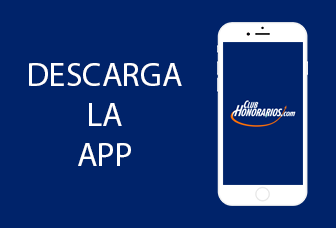
<style>
.page{position:relative;width:336px;height:228px;background:#00236a}
.page>*{position:absolute;margin:0}
.t1{font:33.3px "MyriadPro-Regular";color:#ffffff}
</style>
<div class="page">
<p class="t1" style="left:29px;top:63px;width:153px;height:103px;text-align:center">DESCARGA<br>LA<br>APP</p>
</div>
